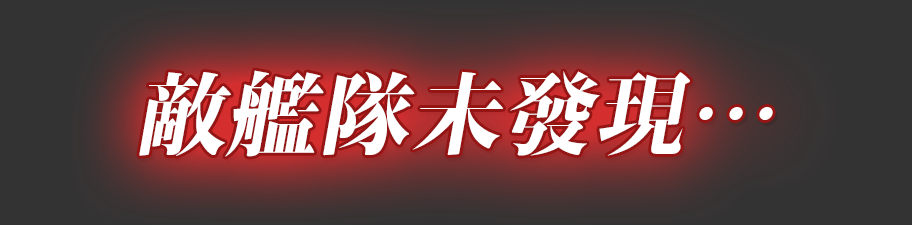
<style>
.page{position:relative;width:912px;height:225px;background:#333333}
.page>*{position:absolute;margin:0}
.t1{font:90px "KochoStd-Heavy";letter-spacing:0.02em;color:#ffffff;font-style:italic}
</style>
<div class="page">
<p class="t1" style="left:139px;top:70px;width:634px;height:87px">敵艦隊未發現…</p>
</div>
